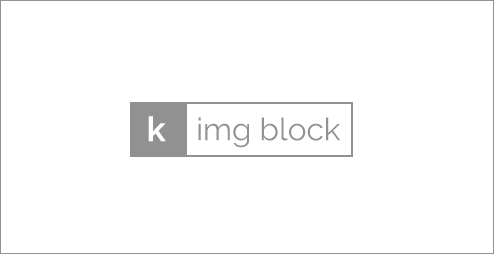
<style>
.page{position:relative;width:494px;height:254px;background:#ffffff}
.page>*{position:absolute;margin:0}
.t1{font:33.4px "Raleway-SemiBold";color:#ffffff;font-weight:bold}
.t2{font:31.3px "Raleway-Regular";color:#919191}
</style>
<div class="page">
<p class="t1" style="left:148px;top:116px;width:18px;height:26px">k</p>
<p class="t2" style="left:198px;top:117px;width:143px;height:31px">img block</p>
</div>
